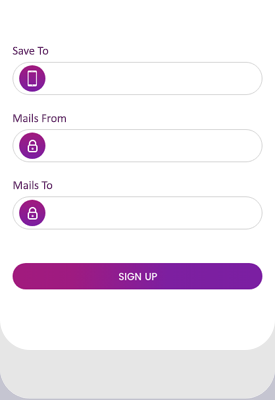
<style>
.page{position:relative;width:275px;height:400px;background:#ffffff}
.page>*{position:absolute;margin:0}
.t1{font:12px "Calibri";color:#6e3773}
</style>
<div class="page">
<p class="t1" style="left:12px;top:46px;width:37px;height:9px">Save To</p>
<p class="t1" style="left:13px;top:113px;width:53px;height:10px">Mails From</p>
<p class="t1" style="left:13px;top:180px;width:40px;height:10px">Mails To</p>
</div>
